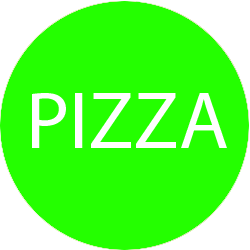
<style>
.page{position:relative;width:250px;height:250px;background:#24ff00}
.page>*{position:absolute;margin:0}
.t1{font:81.4px "MyriadPro-Regular";color:#ffffff}
</style>
<div class="page">
<p class="t1" style="left:32px;top:93px;width:195px;height:55px">PIZZA</p>
</div>
